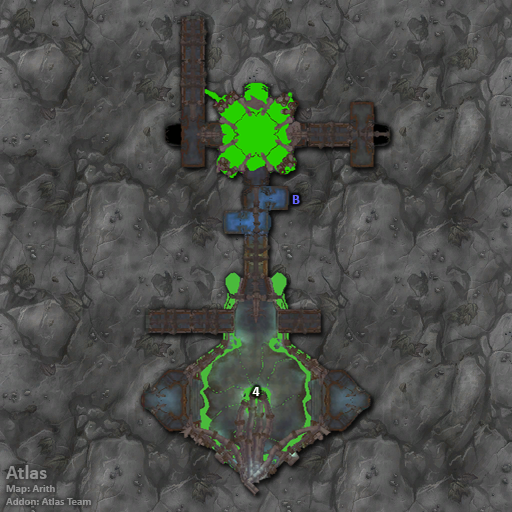
<style>
.page{position:relative;width:512px;height:512px}
.page>*{position:absolute;margin:0}
.t1{font:14px "Calibri-Bold";color:#6666ff}
.t2{font:14px "Calibri-Bold";color:#ffffff}
.t3{font:11px "Calibri-Bold";color:#919291}
.t4{font:20px "Calibri-Bold";color:#919291}
</style>
<div class="page">
<p class="t1" style="left:292px;top:195px;width:8px;height:9px">B</p>
<p class="t2" style="left:252px;top:387px;width:8px;height:9px">4</p>
<p class="t3" style="left:6px;top:465px;width:85px;height:40px"><span class="t4">Atlas<br></span>Map: Arith<br>Addon: Atlas Team</p>
</div>
